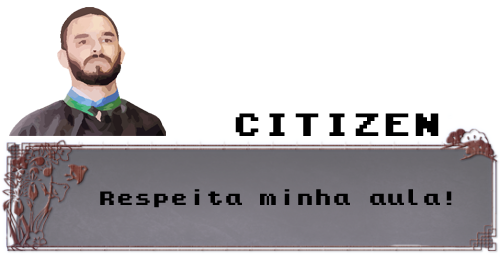
<style>
.page{position:relative;width:500px;height:257px;background:#ffffff}
.page>*{position:absolute;margin:0}
.t1{font:30px "KongtextRegular";color:#000000}
.t2{font:18px "KongtextRegular";color:#000000}
</style>
<div class="page">
<p class="t1" style="left:235px;top:113px;width:204px;height:23px">CITIZEN</p>
<p class="t2" style="left:100px;top:189px;width:352px;height:19px">Respeita minha aula!</p>
</div>
